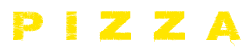
<style>
.page{position:relative;width:250px;height:50px;background:#ffffff}
.page>*{position:absolute;margin:0}
.t1{font:36px "Base05";color:#ffe500;text-transform:uppercase;scale:1.2 1}
</style>
<div class="page">
<p class="t1" style="left:12px;top:10px;width:229px;height:37px">P i Z Z A</p>
</div>
